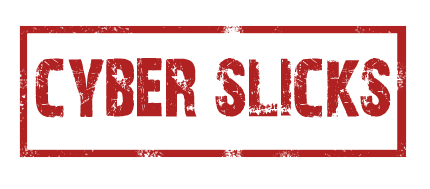
<style>
.page{position:relative;width:430px;height:189px;background:#ffffff}
.page>*{position:absolute;margin:0}
.t1{font:86.5px "28DaysLater";color:#b02222;scale:0.81 1}
</style>
<div class="page">
<p class="t1" style="left:35px;top:58px;width:356px;height:60px">cyber slicks</p>
</div>
